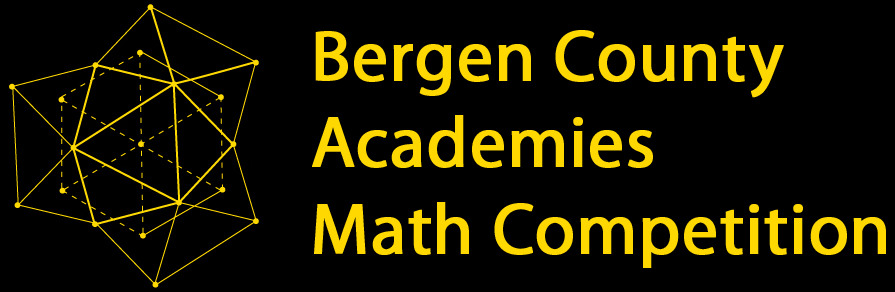
<style>
.page{position:relative;width:895px;height:292px;background:#000000}
.page>*{position:absolute;margin:0}
.t1{font:72px "MyriadPro-Regular";color:#ffd800;font-weight:bold}
</style>
<div class="page">
<p class="t1" style="left:312px;top:30px;width:574px;height:238px">Bergen County <br>Academies<br>Math Competition</p>
</div>
